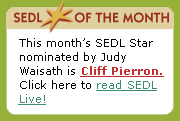
<style>
.page{position:relative;width:180px;height:121px;background:#ffffff}
.page>*{position:absolute;margin:0}
.t1{font:14px "ItcKabel-Demi";letter-spacing:0.005em;color:#9a2b21;text-transform:uppercase}
.t2{font:11px/14px "Verdana";letter-spacing:0.005em;color:#020202}
.t3{font:11px/14px "Verdana-Bold";letter-spacing:0.005em;color:#c12e2e;text-decoration:underline}
.t4{font:11px/14px "Verdana";letter-spacing:0.005em;color:#3c8d6f;text-decoration:underline}
</style>
<div class="page">
<p class="t1" style="left:13px;top:12px;width:156px;height:11px">sedl        of the month</p>
<p class="t2" style="left:18px;top:38px;width:146px;height:67px">This month’s SEDL Star nominated by Judy Waisath is <span class="t3">Cliff Pierron.<br></span>Click here to <span class="t4">read SEDL Live!</span></p>
</div>
